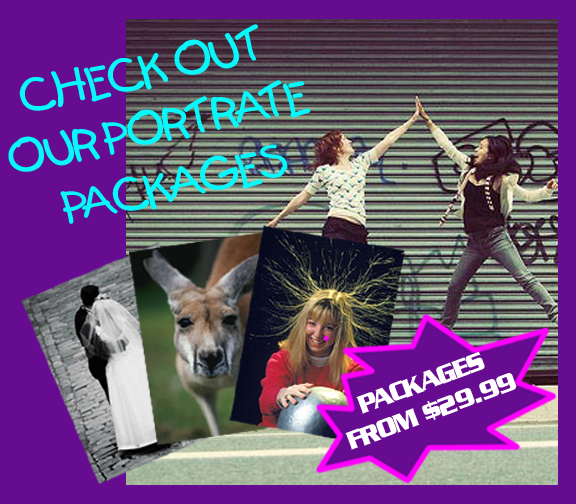
<style>
.page{position:relative;width:576px;height:504px;background:#660c90}
.page>*{position:absolute;margin:0}
.t1{font:49.1px "FirstGrader";letter-spacing:-0.08em;color:#06f8fb;text-transform:uppercase;scale:1.12 1}
.t2{font:25.2px "JuliusBlack";letter-spacing:-0.08em;color:#ffffff;text-transform:uppercase}
</style>
<div class="page">
<p class="t1" style="left:8px;top:24px;width:303px;height:200px;rotate:-13deg">CHeck out our Portrate Packages</p>
<p class="t2" style="left:345px;top:351px;width:172px;height:99px;rotate:-20deg">Packages from $29.99</p>
</div>
